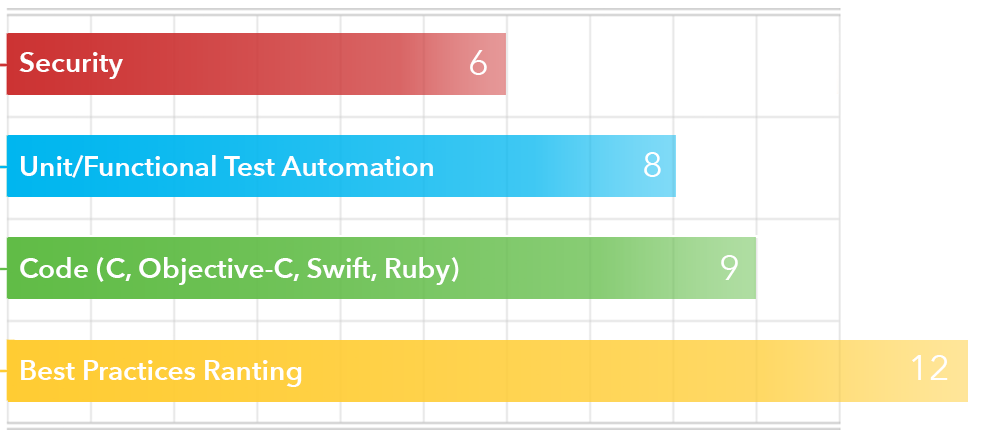
<style>
.page{position:relative;width:982px;height:442px;background:#ffffff}
.page>*{position:absolute;margin:0}
.t1{font:28px "AvenirNext-DemiBold";color:#ffffff}
.t2{font:36px "AvenirNext-Regular";color:#ffffff}
</style>
<div class="page">
<p class="t1" style="left:19px;top:52px;width:104px;height:27px">Security</p>
<p class="t2" style="left:470px;top:50px;width:17px;height:25px">6</p>
<p class="t1" style="left:21px;top:155px;width:412px;height:23px">Unit/Functional Test Automation</p>
<p class="t2" style="left:644px;top:152px;width:17px;height:25px">8</p>
<p class="t1" style="left:20px;top:257px;width:439px;height:28px">Code (C, Objective-C, Swift, Ruby)</p>
<p class="t2" style="left:721px;top:255px;width:17px;height:25px">9</p>
<p class="t1" style="left:21px;top:360px;width:281px;height:27px">Best Practices Ranting</p>
<p class="t2" style="left:912px;top:355px;width:36px;height:25px">12</p>
</div>
